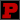
<style>
.page{position:relative;width:20px;height:20px;background:#000000}
.page>*{position:absolute;margin:0}
.t1{font:19.5px "BlackoakStd";color:#c00000;font-weight:bold;font-style:italic;scale:0.42 1}
</style>
<div class="page">
<p class="t1" style="left:2px;top:3px;width:16px;height:16px">P</p>
</div>
